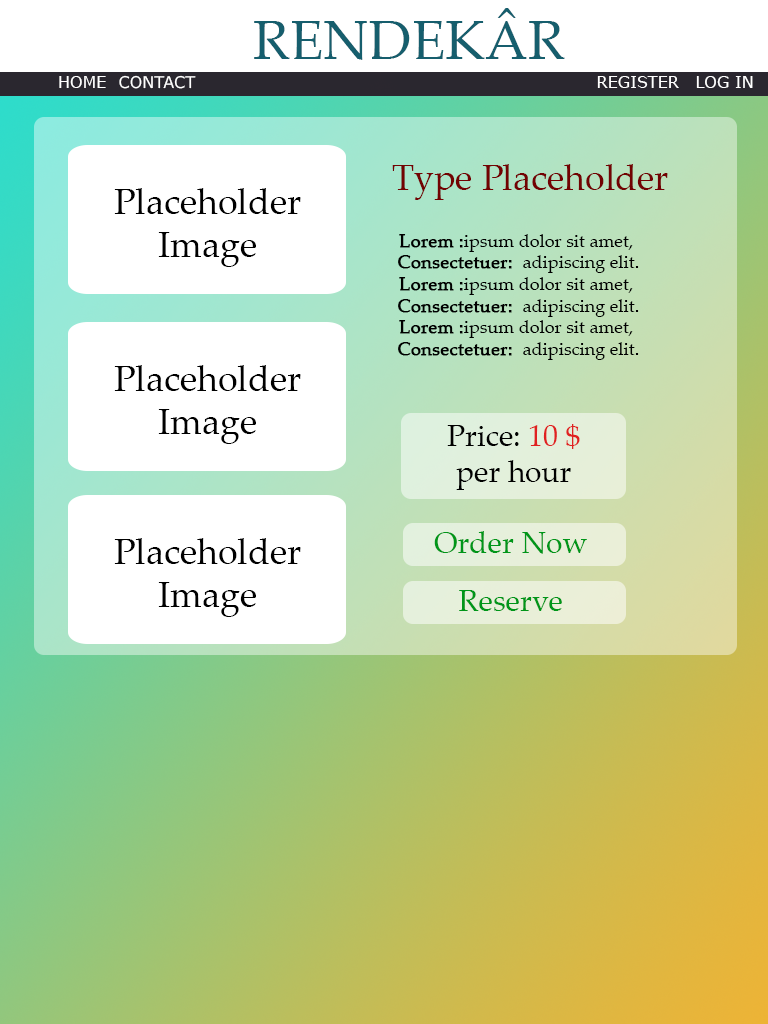
<style>
.page{position:relative;width:768px;height:1024px}
.page>*{position:absolute;margin:0}
.t1{font:55px "PalatinoLinotype-Roman";color:#165e6d}
.t2{font:16px "Verdana";color:#ffffff}
.t3{font:36px "PalatinoLinotype-Roman";color:#720202}
.t4{font:36px "PalatinoLinotype-Roman";color:#000000}
.t5{font:18px "PalatinoLinotype-Roman";color:#000000}
.t6{font:18px "PalatinoLinotype-Roman";color:#000000;font-weight:bold}
.t7{font:30px "PalatinoLinotype-Roman";color:#000000}
.t8{font:30px "PalatinoLinotype-Roman";color:#e02121}
.t9{font:30px "PalatinoLinotype-Roman";color:#009619}
</style>
<div class="page">
<p class="t1" style="left:254px;top:8px;width:311px;height:52px">RENDEKÂR</p>
<p class="t2" style="left:59px;top:76px;width:47px;height:12px">HOME</p>
<p class="t2" style="left:119px;top:75px;width:77px;height:14px">CONTACT</p>
<p class="t2" style="left:597px;top:76px;width:82px;height:12px">REGISTER</p>
<p class="t2" style="left:696px;top:76px;width:57px;height:12px">LOG IN</p>
<p class="t3" style="left:392px;top:164px;width:276px;height:36px">Type Placeholder</p>
<p class="t4" style="left:114px;top:188px;width:187px;height:79px;text-align:center">Placeholder<br>Image</p>
<p class="t5" style="left:398px;top:234px;width:241px;height:126px;text-align:center"><span class="t6">Lorem :</span>ipsum dolor sit amet, <br><span class="t6">Consectetuer:  </span>adipiscing elit.<br><span class="t6">Lorem :</span>ipsum dolor sit amet, <br><span class="t6">Consectetuer:  </span>adipiscing elit.<br><span class="t6">Lorem :</span>ipsum dolor sit amet, <br><span class="t6">Consectetuer:  </span>adipiscing elit.</p>
<p class="t4" style="left:114px;top:365px;width:187px;height:79px;text-align:center">Placeholder<br>Image</p>
<p class="t7" style="left:447px;top:424px;width:133px;height:66px;text-align:center">Price: <span class="t8">10 $ <br></span>per hour</p>
<p class="t9" style="left:434px;top:531px;width:153px;height:23px">Order Now</p>
<p class="t4" style="left:114px;top:538px;width:187px;height:79px;text-align:center">Placeholder<br>Image</p>
<p class="t9" style="left:459px;top:590px;width:103px;height:21px">Reserve</p>
</div>
